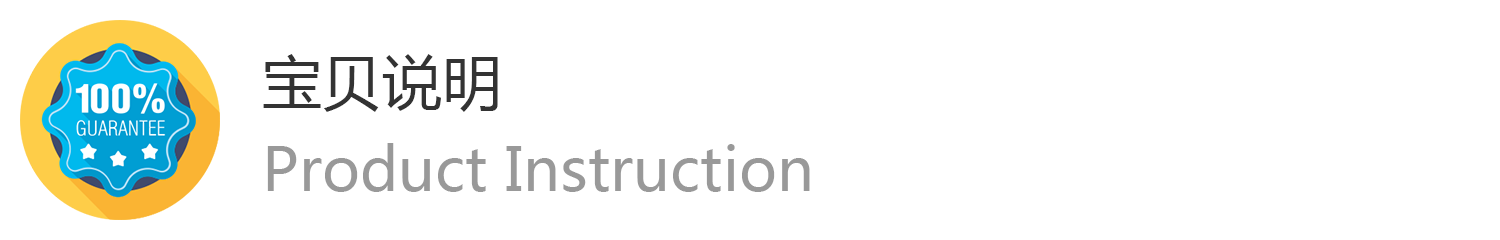
<style>
.page{position:relative;width:1500px;height:240px;background:#ffffff}
.page>*{position:absolute;margin:0}
.t1{font:60px "MicrosoftYaHei";color:#333333}
.t2{font:60px "MicrosoftYaHei";color:#999999}
</style>
<div class="page">
<p class="t1" style="left:263px;top:54px;width:235px;height:58px">宝贝说明</p>
<p class="t2" style="left:267px;top:143px;width:543px;height:49px">Product Instruction</p>
</div>
